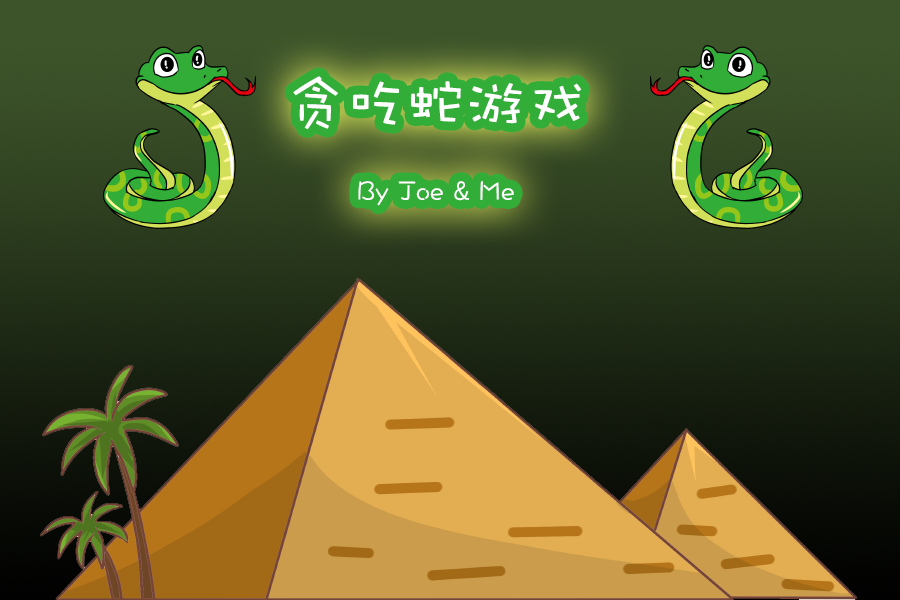
<style>
.page{position:relative;width:900px;height:600px}
.page>*{position:absolute;margin:0}
.t1{font:28px "DFWaWaSC-W5";color:#ffffff}
.t2{font:60px "DFWaWaSC-W5";color:#ffffff}
</style>
<div class="page">
<p class="t1" style="left:293px;top:76px;width:289px;height:130px;text-align:center"><span class="t2">贪吃蛇游戏<br></span>By Joe &amp; Me</p>
</div>
